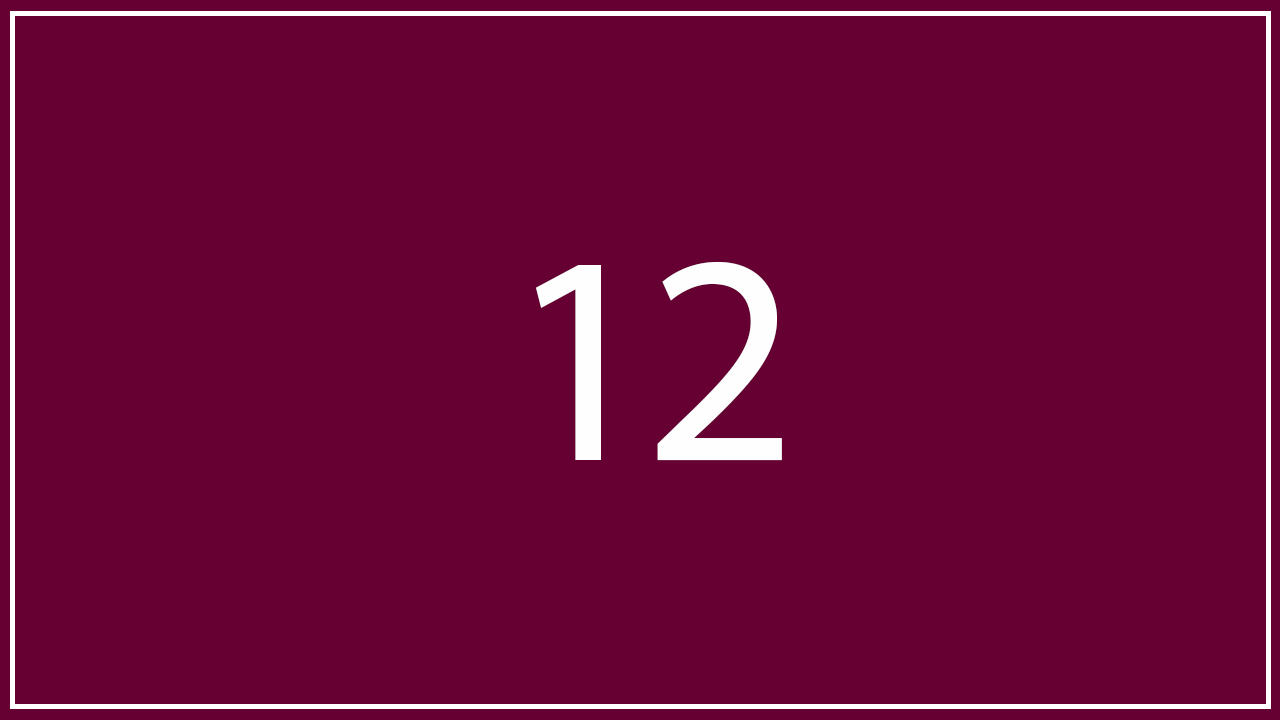
<style>
.page{position:relative;width:1280px;height:720px;background:#660033}
.page>*{position:absolute;margin:0}
.t1{font:300px "Gulim";letter-spacing:-0.05em;color:#fefefe}
</style>
<div class="page">
<p class="t1" style="left:536px;top:261px;width:251px;height:203px">10</p>
<p class="t1" style="left:536px;top:265px;width:204px;height:195px">11</p>
<p class="t1" style="left:536px;top:261px;width:246px;height:200px">12</p>
</div>
